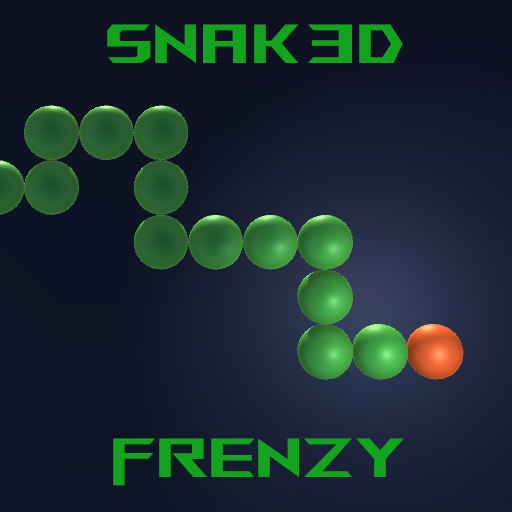
<style>
.page{position:relative;width:512px;height:512px}
.page>*{position:absolute;margin:0}
.t1{font:55px "AniMeMatrix-MB_EN";color:#13a41d;font-variant:small-caps}
</style>
<div class="page">
<p class="t1" style="left:107px;top:24px;width:296px;height:39px">SNAK3D</p>
<p class="t1" style="left:113px;top:438px;width:291px;height:48px">FRENZY</p>
</div>
